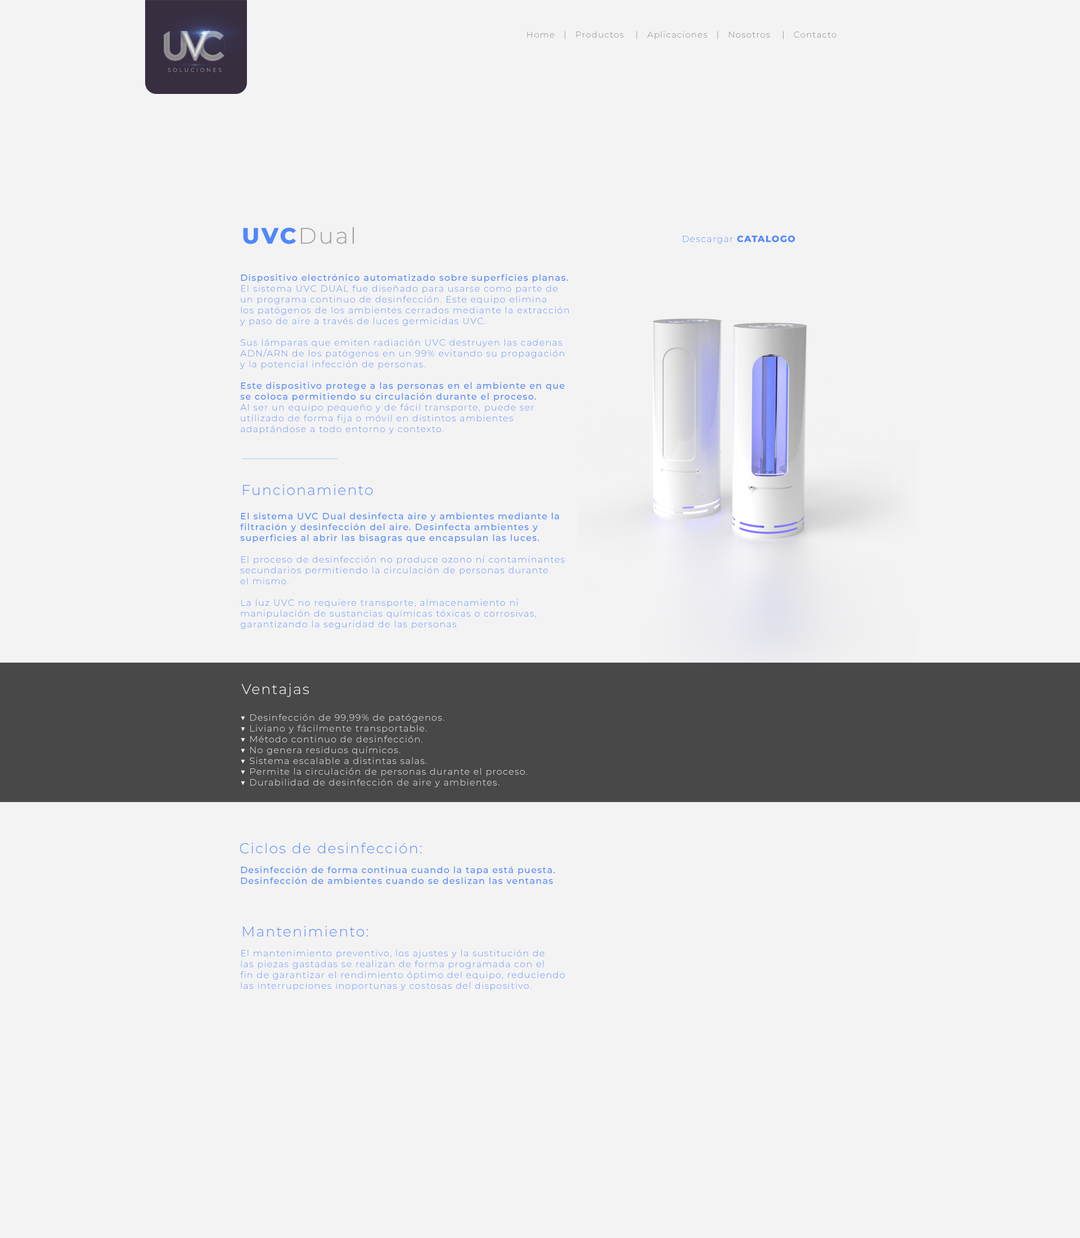
<style>
.page{position:relative;width:1080px;height:1238px;background:#f3f3f3}
.page>*{position:absolute;margin:0}
.t1{font:8.4px "Montserrat-Light";letter-spacing:0.08em;color:#7f7b7b}
.t2{font:22.5px "Montserrat-Light";letter-spacing:0.08em;color:#9c9c9d}
.t3{font:22.5px "Montserrat-ExtraBold";letter-spacing:0.08em;color:#4f87fd}
.t4{font:9px "Montserrat-Light";letter-spacing:0.08em;color:#4f87fd}
.t5{font:9px "Montserrat-ExtraBold";letter-spacing:0.08em;color:#4f87fd}
.t6{font:9px "Montserrat-Medium";letter-spacing:0.08em;color:#4f87fd}
.t7{font:14.2px "Montserrat-Light";letter-spacing:0.08em;color:#4f87fd}
.t8{font:14.2px "Montserrat-Light";letter-spacing:0.08em;color:#ffffff}
.t9{font:9px "Montserrat-Light";letter-spacing:0.08em;color:#f3f3f3}
</style>
<div class="page">
<p class="t1" style="left:527px;top:31px;width:309px;height:8px">Home   |   Productos    |   Aplicaciones   |   Nosotros    |   Contacto</p>
<p class="t2" style="left:243px;top:227px;width:111px;height:17px"><span class="t3">UVC</span>Dual</p>
<p class="t4" style="left:683px;top:235px;width:112px;height:9px">Descargar <span class="t5">CATALOGO</span></p>
<p class="t4" style="left:240px;top:274px;width:329px;height:160px"><span class="t6">Dispositivo electrónico automatizado sobre superficies planas. <br></span>El sistema UVC DUAL fue diseñado para usarse como parte de <br>un programa continuo de desinfección. Este equipo elimina <br>los patógenos de los ambientes cerrados mediante la extracción <br>y paso de aire a través de luces germicidas UVC.<br><br>Sus lámparas que emiten radiación UVC destruyen las cadenas <br>ADN/ARN de los patógenos en un 99% evitando su propagación <br>y la potencial infección de personas.<br><span class="t6"><br>Este dispositivo protege a las personas en el ambiente en que <br>se coloca permitiendo su circulación durante el proceso. <br></span>Al ser un equipo pequeño y de fácil transporte, puede ser <br>utilizado de forma fija o móvil en distintos ambientes <br>adaptándose a todo entorno y contexto.</p>
<p class="t7" style="left:243px;top:484px;width:130px;height:11px">Funcionamiento</p>
<p class="t4" style="left:240px;top:512px;width:325px;height:117px"><span class="t6">El sistema UVC Dual desinfecta aire y ambientes mediante la <br>filtración y desinfección del aire. Desinfecta ambientes y <br>superficies al abrir las bisagras que encapsulan las luces. <br><br></span>El proceso de desinfección no produce ozono ni contaminantes <br>secundarios permitiendo la circulación de personas durante <br>el mismo.<br><br>La luz UVC no requiere transporte, almacenamiento ni <br>manipulación de sustancias químicas tóxicas o corrosivas, <br>garantizando la seguridad de las personas</p>
<p class="t8" style="left:241px;top:683px;width:68px;height:14px">Ventajas</p>
<p class="t9" style="left:241px;top:714px;width:286px;height:74px">▼ Desinfección de 99,99% de patógenos.<br>▼ Liviano y fácilmente transportable.<br>▼ Método continuo de desinfección.<br>▼ No genera residuos químicos.<br>▼ Sistema escalable a distintas salas.<br>▼ Permite la circulación de personas durante el proceso.<br>▼ Durabilidad de desinfección de aire y ambientes.</p>
<p class="t7" style="left:240px;top:843px;width:182px;height:11px">Ciclos de desinfección:</p>
<p class="t6" style="left:241px;top:866px;width:314px;height:18px">Desinfección de forma continua cuando la tapa está puesta.<br>Desinfección de ambientes cuando se deslizan las ventanas</p>
<p class="t7" style="left:243px;top:926px;width:125px;height:11px">Mantenimiento:</p>
<p class="t4" style="left:240px;top:950px;width:325px;height:41px">El mantenimiento preventivo, los ajustes y la sustitución de <br>las piezas gastadas se realizan de forma programada con el <br>fin de garantizar el rendimiento óptimo del equipo, reduciendo<br>las interrupciones inoportunas y costosas del dispositivo.</p>
</div>
